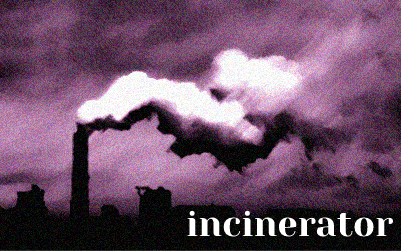
<style>
.page{position:relative;width:401px;height:251px}
.page>*{position:absolute;margin:0}
.t1{font:36px "YesevaOne-Regular";color:#ffffff}
.t2{font:36px "YesevaOne-Regular";color:#821b98}
</style>
<div class="page">
<p class="t1" style="left:187px;top:210px;width:206px;height:27px"><span class="t2">i</span>ncinerator</p>
</div>
